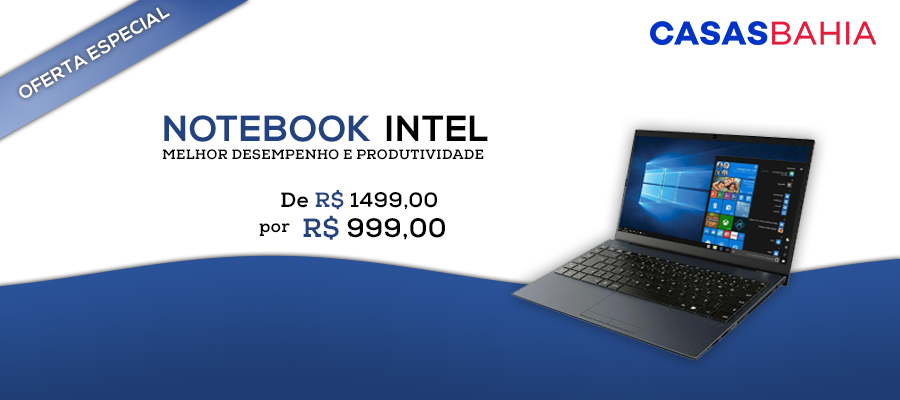
<style>
.page{position:relative;width:900px;height:400px;background:#ffffff}
.page>*{position:absolute;margin:0}
.t1{font:36.3px "NexaBold";letter-spacing:0.02em;color:#22437f}
.t2{font:36.3px "NexaBold";letter-spacing:0.02em;color:#000000}
.t3{font:13.6px "NexaSlab-xBold";letter-spacing:0.02em;color:#000000}
.t4{font:20.9px "NexaSlab-xBold";letter-spacing:0.02em;color:#000000}
.t5{font:20.9px "NexaSlab-xBold";letter-spacing:0.02em;color:#22437f}
.t6{font:26.3px "NexaSlab-xBold";letter-spacing:0.02em;color:#000000}
.t7{font:26.3px "NexaSlab-xBold";letter-spacing:0.02em;color:#22437f}
.t8{font:17.1px "NexaSlab-xBold";letter-spacing:0.02em;color:#000000}
</style>
<div class="page">
<p class="t1" style="left:164px;top:115px;width:206px;height:27px">NOTEBOOK</p>
<p class="t2" style="left:386px;top:115px;width:102px;height:26px">INTEL</p>
<p class="t3" style="left:162px;top:149px;width:322px;height:11px">MELHOR DESEMPENHO E PRODUTIVIDADE</p>
<p class="t4" style="left:281px;top:190px;width:156px;height:20px">De <span class="t5">R$ </span>1499,00</p>
<p class="t6" style="left:303px;top:215px;width:142px;height:25px"><span class="t7">R$ </span>999,00</p>
<p class="t8" style="left:259px;top:223px;width:31px;height:13px">por</p>
</div>
